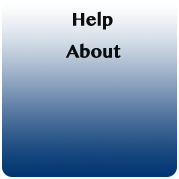
<style>
.page{position:relative;width:179px;height:179px}
.page>*{position:absolute;margin:0}
.t1{font:18px "MyanmarMN-Bold";color:#0d0e0e}
</style>
<div class="page">
<p class="t1" style="left:73px;top:11px;width:40px;height:19px">Help</p>
<p class="t1" style="left:66px;top:43px;width:55px;height:15px">About</p>
</div>
